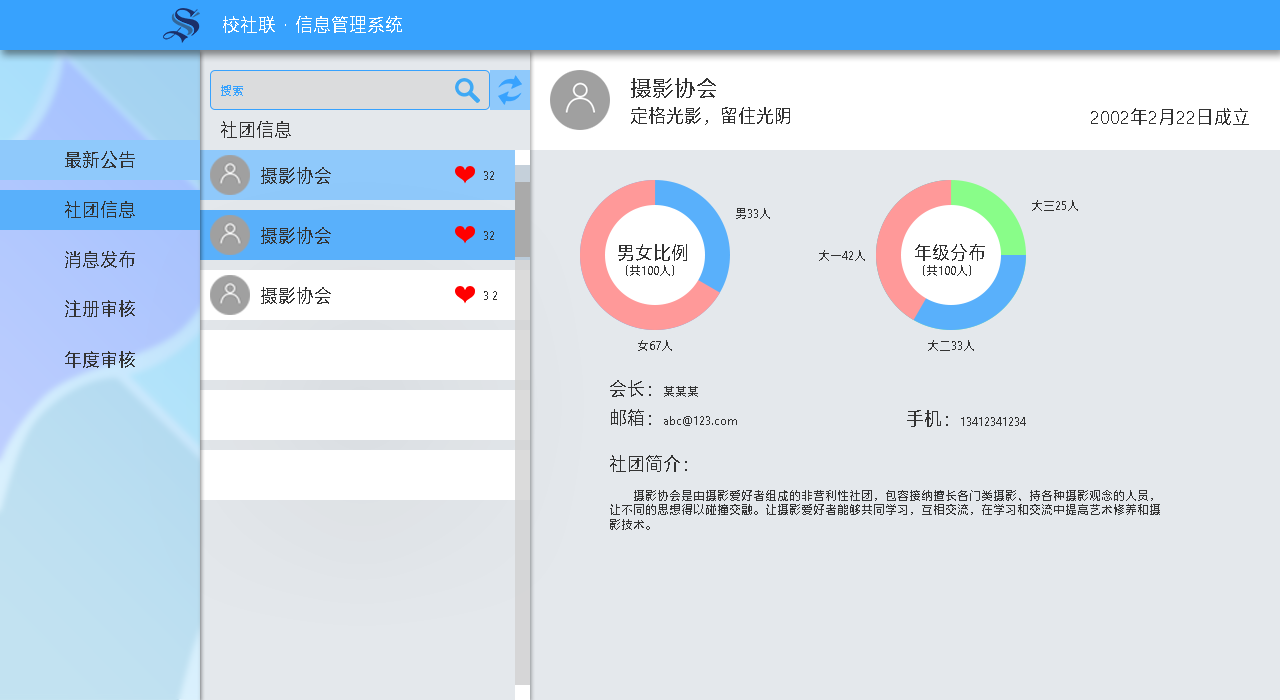
<style>
.page{position:relative;width:1280px;height:700px;background:#e4e8ec}
.page>*{position:absolute;margin:0}
.t1{font:18px "MicrosoftYaHei";color:#ffffff}
.t2{font:22px "MicrosoftYaHei";color:#333333}
.t3{font:12px "MicrosoftYaHei";color:#37a2fe}
.t4{font:18px "MicrosoftYaHei";color:#333333}
.t5{font:12px "MicrosoftYaHei";color:#333333}
</style>
<div class="page">
<p class="t1" style="left:223px;top:16px;width:179px;height:17px">校社联 · 信息管理系统</p>
<p class="t2" style="left:631px;top:78px;width:85px;height:20px">摄影协会</p>
<p class="t3" style="left:221px;top:85px;width:22px;height:11px">搜索</p>
<p class="t4" style="left:631px;top:107px;width:159px;height:18px">定格光影，留住光阴</p>
<p class="t4" style="left:1091px;top:108px;width:158px;height:17px">2002年2月22日成立</p>
<p class="t4" style="left:221px;top:121px;width:70px;height:17px">社团信息</p>
<p class="t4" style="left:65px;top:151px;width:70px;height:17px">最新公告</p>
<p class="t4" style="left:261px;top:167px;width:70px;height:17px">摄影协会</p>
<p class="t5" style="left:484px;top:171px;width:10px;height:9px">32</p>
<p class="t4" style="left:65px;top:201px;width:70px;height:17px">社团信息</p>
<p class="t5" style="left:736px;top:208px;width:34px;height:11px">男33人</p>
<p class="t5" style="left:1032px;top:200px;width:46px;height:11px">大三25人</p>
<p class="t4" style="left:261px;top:227px;width:70px;height:17px">摄影协会</p>
<p class="t5" style="left:484px;top:231px;width:10px;height:9px">32</p>
<p class="t5" style="left:618px;top:244px;width:69px;height:32px"><span class="t4">男女比例<br></span>（共100人）</p>
<p class="t5" style="left:915px;top:244px;width:70px;height:32px"><span class="t4">年级分布<br></span>（共100人）</p>
<p class="t4" style="left:65px;top:251px;width:70px;height:17px">消息发布</p>
<p class="t5" style="left:819px;top:250px;width:46px;height:11px">大一42人</p>
<p class="t4" style="left:261px;top:287px;width:70px;height:17px">摄影协会</p>
<p class="t5" style="left:484px;top:291px;width:13px;height:9px">3 2</p>
<p class="t4" style="left:65px;top:300px;width:70px;height:17px">注册审核</p>
<p class="t5" style="left:638px;top:340px;width:34px;height:11px">女67人</p>
<p class="t5" style="left:928px;top:340px;width:46px;height:11px">大二33人</p>
<p class="t4" style="left:65px;top:351px;width:70px;height:17px">年度审核</p>
<p class="t4" style="left:610px;top:380px;width:88px;height:17px">会长：<span class="t5">某某某</span></p>
<p class="t5" style="left:611px;top:409px;width:126px;height:17px"><span class="t4">邮箱：</span>abc@123.com</p>
<p class="t5" style="left:907px;top:410px;width:119px;height:17px"><span class="t4">手机：</span>13412341234</p>
<p class="t5" style="left:610px;top:455px;width:550px;height:75px"><span class="t4">社团简介：<br></span><br>        摄影协会是由摄影爱好者组成的非营利性社团，包容接纳擅长各门类摄影、持各种摄影观念的人员，<br>让不同的思想得以碰撞交融。让摄影爱好者能够共同学习，互相交流，在学习和交流中提高艺术修养和摄<br>影技术。</p>
</div>
